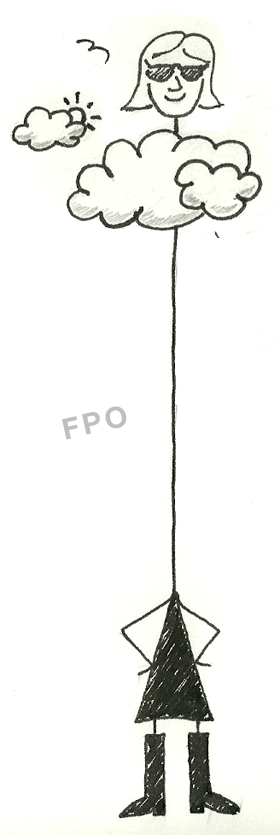
<style>
.page{position:relative;width:280px;height:835px;background:#ffffff}
.page>*{position:absolute;margin:0}
.t1{font:29.2px "HelveticaNeue-Bold";letter-spacing:0.12em;color:#bfbfbf}
</style>
<div class="page">
<p class="t1" style="left:62px;top:406px;width:65px;height:34px;rotate:-13deg">FPO</p>
</div>
